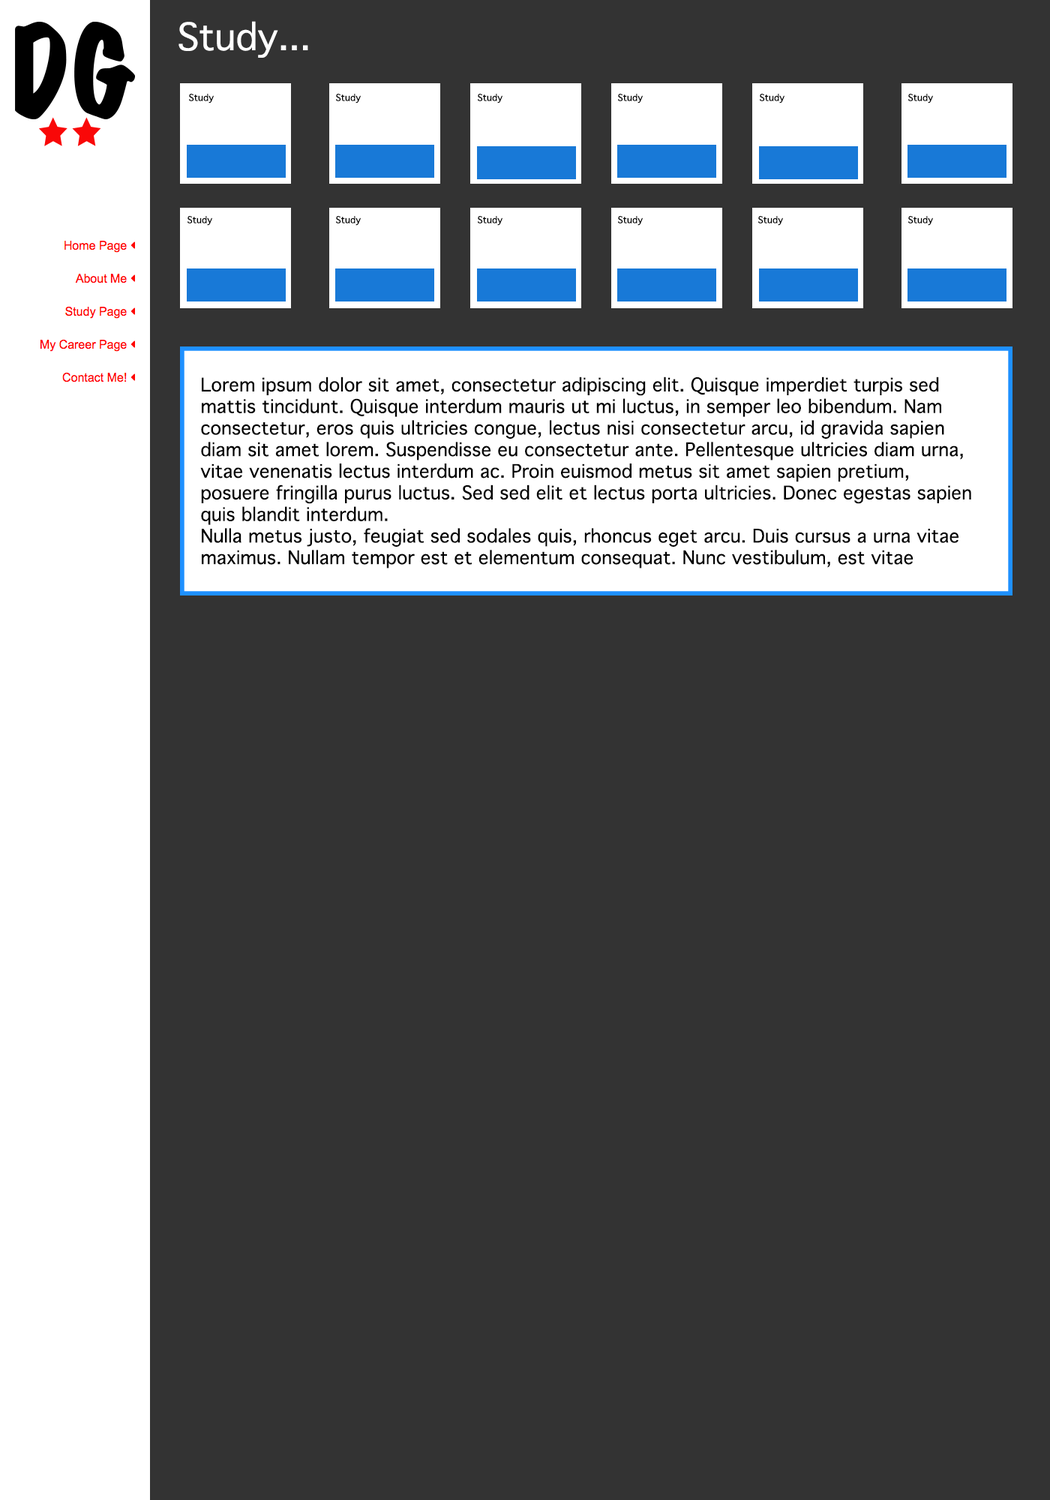
<style>
.page{position:relative;width:1050px;height:1500px;background:#333333}
.page>*{position:absolute;margin:0}
.t1{font:36px "Geneva";color:#ffffff}
.t2{font:9px "Geneva";color:#000000}
.t3{font:18px "Geneva";color:#000000}
</style>
<div class="page">
<p class="t1" style="left:178px;top:21px;width:130px;height:37px">Study...</p>
<p class="t2" style="left:189px;top:94px;width:25px;height:10px">Study</p>
<p class="t2" style="left:336px;top:94px;width:25px;height:10px">Study</p>
<p class="t2" style="left:478px;top:94px;width:24px;height:10px">Study</p>
<p class="t2" style="left:618px;top:94px;width:25px;height:10px">Study</p>
<p class="t2" style="left:760px;top:94px;width:24px;height:10px">Study</p>
<p class="t2" style="left:908px;top:94px;width:25px;height:10px">Study</p>
<p class="t2" style="left:188px;top:216px;width:24px;height:10px">Study</p>
<p class="t2" style="left:336px;top:216px;width:25px;height:10px">Study</p>
<p class="t2" style="left:478px;top:216px;width:24px;height:10px">Study</p>
<p class="t2" style="left:618px;top:216px;width:25px;height:10px">Study</p>
<p class="t2" style="left:758px;top:216px;width:25px;height:10px">Study</p>
<p class="t2" style="left:908px;top:216px;width:25px;height:10px">Study</p>
<p class="t3" style="left:200px;top:376px;width:771px;height:192px">Lorem ipsum dolor sit amet, consectetur adipiscing elit. Quisque imperdiet turpis sed mattis tincidunt. Quisque interdum mauris ut mi luctus, in semper leo bibendum. Nam consectetur, eros quis ultricies congue, lectus nisi consectetur arcu, id gravida sapien diam sit amet lorem. Suspendisse eu consectetur ante. Pellentesque ultricies diam urna, vitae venenatis lectus interdum ac. Proin euismod metus sit amet sapien pretium, posuere fringilla purus luctus. Sed sed elit et lectus porta ultricies. Donec egestas sapien quis blandit interdum.<br>Nulla metus justo, feugiat sed sodales quis, rhoncus eget arcu. Duis cursus a urna vitae maximus. Nullam tempor est et elementum consequat. Nunc vestibulum, est vitae imperdiet interdum, urna mi consequat felis, eu dignissim metus leo ut nibh. In eu auctor ex. Vestibulum congue mattis odio auctor rhoncus. Phasellus posuere, ligula sit amet finibus scelerisque, mauris nisl mollis massa, et scelerisque elit risus a neque. Quisque mauris urna, pretium sit amet risus nec, mattis tempor velit. Morbi accumsan libero sit amet fringilla malesuada. Aenean id magna sit amet nibh suscipit ornare vitae vel odio. Aliquam eu vehicula tortor. Etiam mollis diam condimentum ex lobortis, ut lobortis massa tincidunt. Suspendisse dignissim, ante sed rutrum bibendum, tortor justo facilisis dui, nec efficitur turpis elit.</p>
</div>
